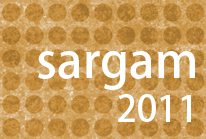
<style>
.page{position:relative;width:206px;height:139px}
.page>*{position:absolute;margin:0}
.t1{font:48px "KozGoPro-Medium";color:#ffffff}
.t2{font:36px "KozGoPro-Medium";color:#ffffff}
</style>
<div class="page">
<p class="t1" style="left:38px;top:51px;width:157px;height:71px;text-align:right">sargam<br> <span class="t2">2011</span></p>
</div>
